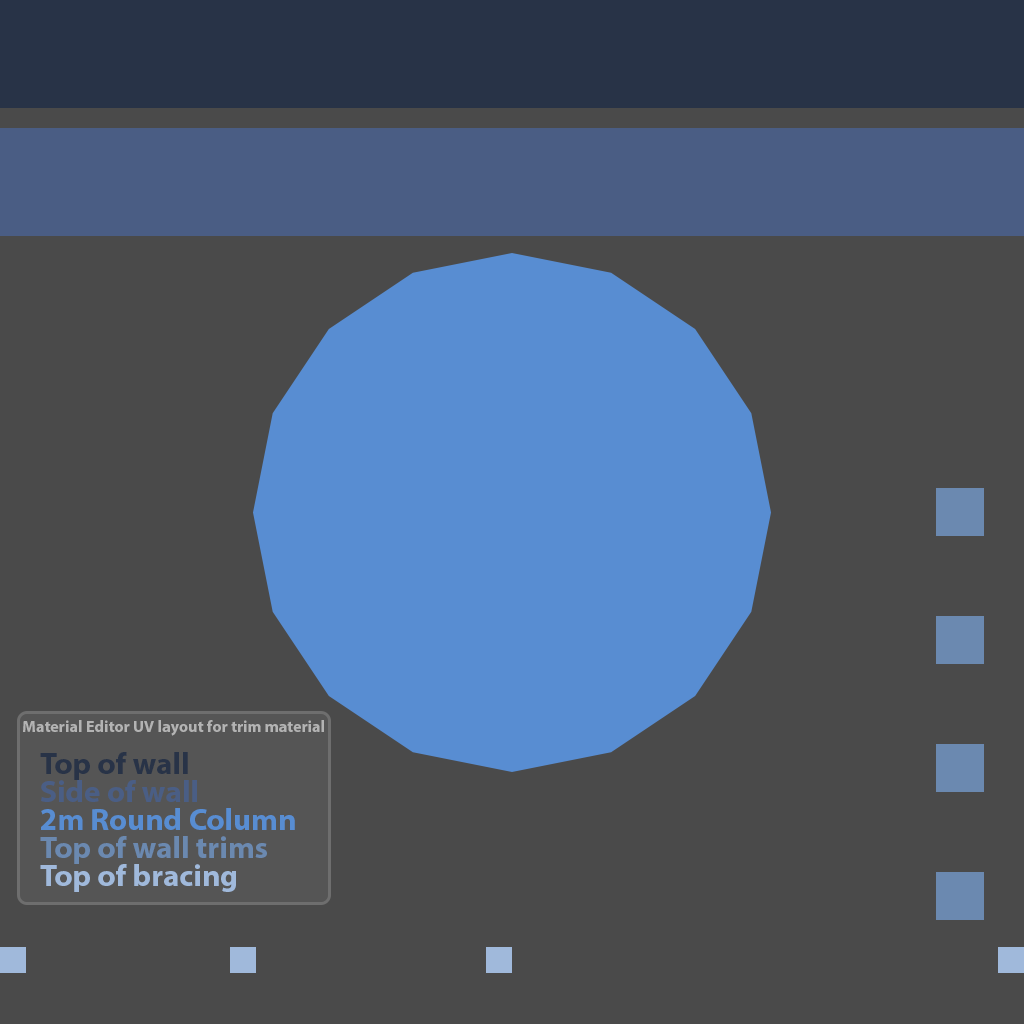
<style>
.page{position:relative;width:1024px;height:1024px;background:#4a4a4a}
.page>*{position:absolute;margin:0}
.t1{font:16.2px "MyriadPro-Bold";color:#b3b3b3}
.t2{font:31.1px "MyriadPro-Bold";color:#283347}
.t3{font:31.1px "MyriadPro-Bold";color:#4a5e85}
.t4{font:31.1px "MyriadPro-Bold";color:#588dd2}
.t5{font:31.1px "MyriadPro-Bold";color:#6b89b0}
.t6{font:31.1px "MyriadPro-Bold";color:#a0b9db}
</style>
<div class="page">
<p class="t1" style="left:23px;top:720px;width:301px;height:16px">Material Editor UV layout for trim material</p>
<p class="t2" style="left:40px;top:752px;width:148px;height:28px">Top of wall</p>
<p class="t3" style="left:41px;top:780px;width:156px;height:22px">Side of wall</p>
<p class="t4" style="left:41px;top:808px;width:254px;height:22px">2m Round Column</p>
<p class="t5" style="left:40px;top:836px;width:227px;height:28px">Top of wall trims</p>
<p class="t6" style="left:40px;top:864px;width:196px;height:28px">Top of bracing</p>
</div>
